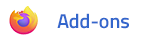
<style>
.page{position:relative;width:156px;height:41px;background:#ffffff}
.page>*{position:absolute;margin:0}
.t1{font:20px "Titillium-Semibold";color:#3366cc}
</style>
<div class="page">
<p class="t1" style="left:57px;top:13px;width:72px;height:16px">Add-ons</p>
</div>
